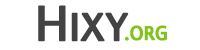
<style>
.page{position:relative;width:200px;height:50px;background:#ffffff}
.page>*{position:absolute;margin:0}
.t1{font:50px "LisboaSansSC";letter-spacing:-0.05em;color:#434343;font-weight:bold}
.t2{font:25px "LisboaSansSC";letter-spacing:-0.05em;color:#80c31c;font-weight:bold}
</style>
<div class="page">
<p class="t1" style="left:38px;top:5px;width:91px;height:37px">Hixy</p>
<p class="t2" style="left:125px;top:25px;width:42px;height:16px">.org</p>
</div>
